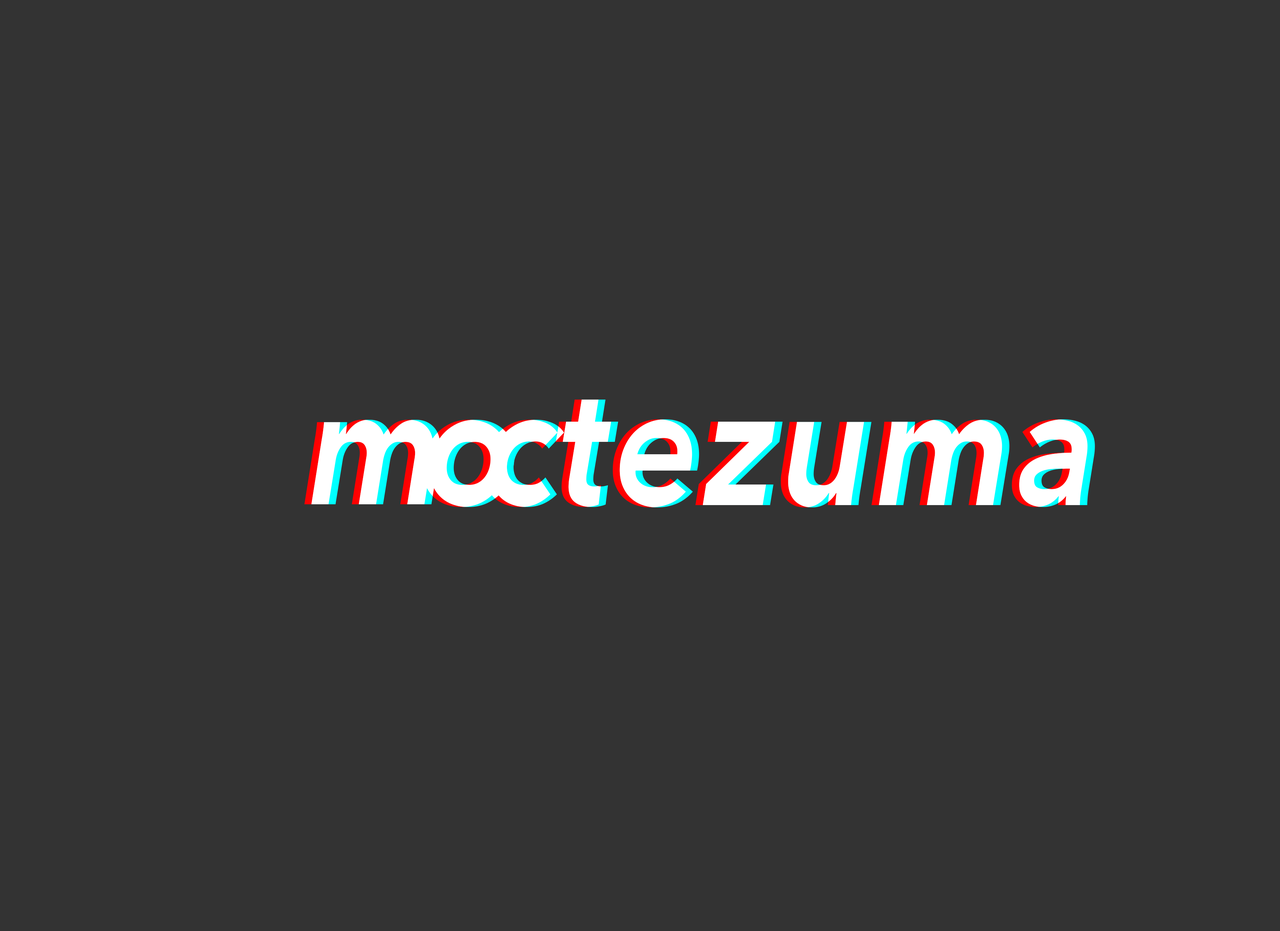
<style>
.page{position:relative;width:1280px;height:931px;background:#333333}
.page>*{position:absolute;margin:0}
.t1{font:167.4px "AvenirNext-BoldItalic";color:#ffffff;scale:0.91 1}
.t2{font:165.8px "AvenirNext-BoldItalic";color:#ffffff;scale:0.91 1}
</style>
<div class="page">
<p class="t1" style="left:556px;top:400px;width:532px;height:108px">tezuma</p>
<p class="t1" style="left:563px;top:400px;width:532px;height:108px">tezuma</p>
<p class="t2" style="left:304px;top:420px;width:130px;height:84px">m</p>
<p class="t2" style="left:311px;top:420px;width:130px;height:84px">m</p>
<p class="t2" style="left:423px;top:420px;width:85px;height:87px">o</p>
<p class="t2" style="left:430px;top:420px;width:85px;height:87px">o</p>
<p class="t2" style="left:483px;top:420px;width:75px;height:87px">c</p>
<p class="t2" style="left:490px;top:420px;width:74px;height:87px">c</p>
</div>
